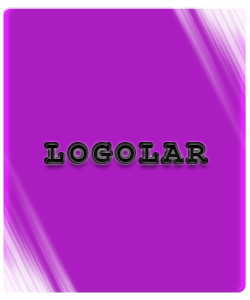
<style>
.page{position:relative;width:250px;height:300px;background:#ab1dc0}
.page>*{position:absolute;margin:0}
.t1{font:31px "CourierNewPS-BoldMT";letter-spacing:0.16em;color:#0f0f0f}
.t2{font:29.5px "CourierNewPS-BoldMT";letter-spacing:0.2em;color:#0b0b0b}
</style>
<div class="page">
<p class="t1" style="left:46px;top:144px;width:161px;height:18px">LOGOLAR</p>
<p class="t2" style="left:47px;top:145px;width:159px;height:17px">LOGOLAR</p>
</div>
